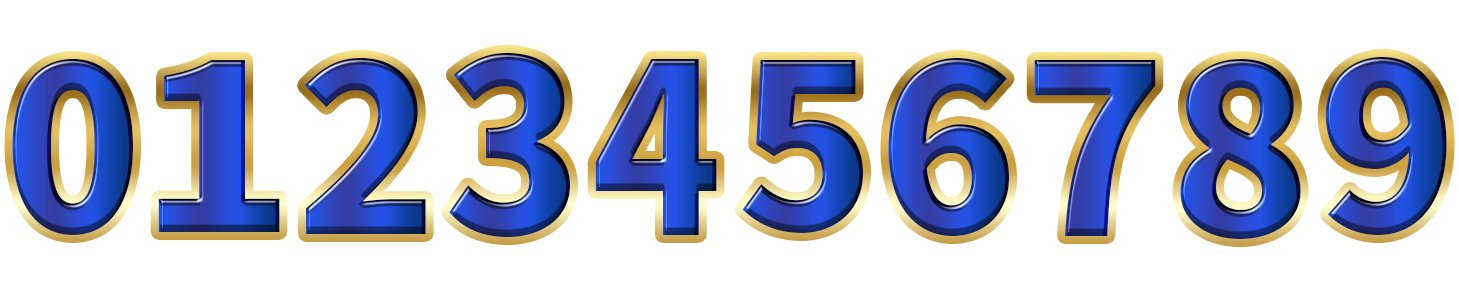
<style>
.page{position:relative;width:1459px;height:292px;background:#ffffff}
.page>*{position:absolute;margin:0}
.t1{font:108.6px "SourceHanSans-Heavy";scale:0.95 1}
.t2{font:103.4px "SourceHanSans-Heavy"}
.t3{font:93.1px "SourceHanSans-Heavy";scale:1.11 1}
.t4{font:113.7px "SourceHanSans-Heavy";scale:0.91 1}
</style>
<div class="page">
<p class="t1" style="left:449px;top:52px;width:121px;height:186px">3</p>
<p class="t2" style="left:12px;top:58px;width:121px;height:177px;text-align:center">0</p>
<p class="t3" style="left:158px;top:60px;width:122px;height:172px;text-align:right">1</p>
<p class="t2" style="left:305px;top:58px;width:121px;height:176px">2</p>
<p class="t4" style="left:595px;top:59px;width:122px;height:176px">4</p>
<p class="t2" style="left:742px;top:60px;width:121px;height:173px">5</p>
<p class="t2" style="left:888px;top:58px;width:121px;height:179px;text-align:center">6</p>
<p class="t2" style="left:1034px;top:60px;width:122px;height:176px;text-align:center">7</p>
<p class="t2" style="left:1180px;top:59px;width:121px;height:180px;text-align:center">8</p>
<p class="t2" style="left:1325px;top:57px;width:122px;height:179px;text-align:center">9</p>
</div>
